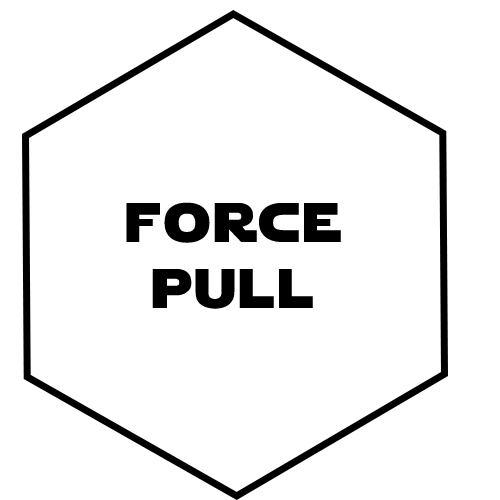
<style>
.page{position:relative;width:500px;height:500px;background:#ffffff}
.page>*{position:absolute;margin:0}
.t1{font:55px "StarJedi";letter-spacing:0.07em;color:#000000}
</style>
<div class="page">
<p class="t1" style="left:126px;top:202px;width:215px;height:107px;text-align:center">force<br>pull</p>
</div>
